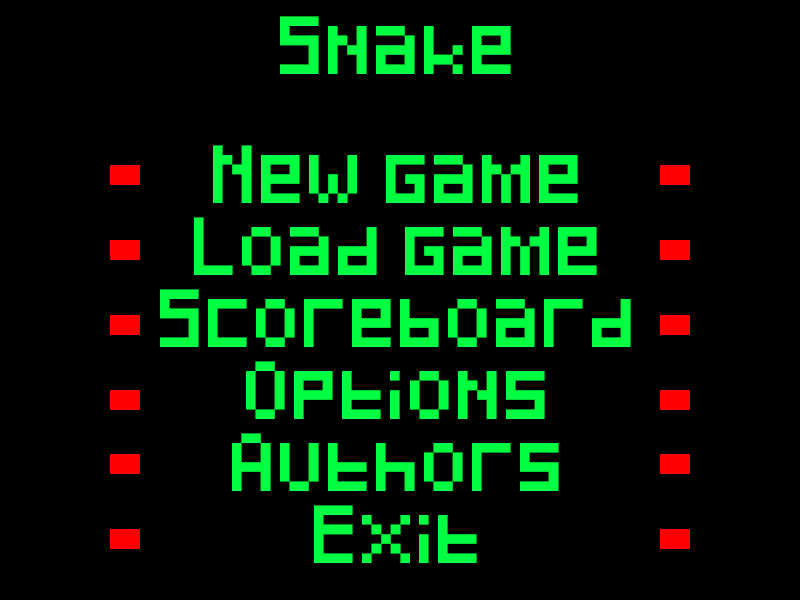
<style>
.page{position:relative;width:800px;height:600px;background:#000000}
.page>*{position:absolute;margin:0}
.t1{font:48px/72px "Pixeled";color:#00ff40}
.t2{font:12px "Pixeled";color:#00ff40}
.t3{font:48px "Pixeled";color:#00ff40}
</style>
<div class="page">
<p class="t1" style="left:160px;top:16px;width:471px;height:547px;text-align:center"><span class="t2"><br></span><span class="t3">Snake<br><br></span>New game<br>Load game<br>Scoreboard<br>Options<br>Authors<br>Exit</p>
</div>
